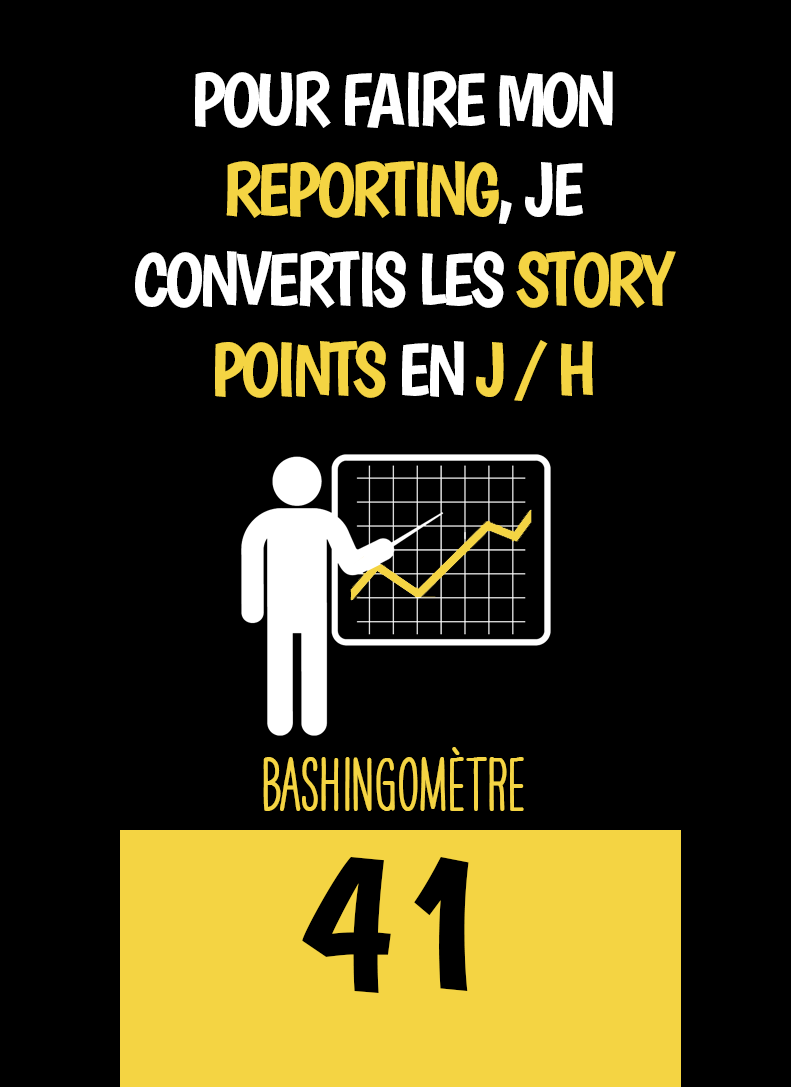
<style>
.page{position:relative;width:791px;height:1087px;background:#000000}
.page>*{position:absolute;margin:0}
.t1{font:75px "Boogaloo-Regular";letter-spacing:-0.06em;color:#ffffff}
.t2{font:75px "Boogaloo-Regular";letter-spacing:-0.06em;color:#f4d443}
.t3{font:66.7px "HAVEANICEDAYTallW04-Bold";color:#f4d443}
.t4{font:200px "Boogaloo-Regular";color:#000000}
</style>
<div class="page">
<p class="t1" style="left:135px;top:71px;width:541px;height:330px;text-align:center">POUR FAIRE MON<br><span class="t2">REPORTING</span>, JE CONVERTIS LES <span class="t2">STORY POINTS</span> EN <span class="t2">J / H</span></p>
<p class="t3" style="left:263px;top:747px;width:261px;height:64px">BASHINgomètre</p>
<p class="t4" style="left:302px;top:857px;width:167px;height:136px">41</p>
</div>
